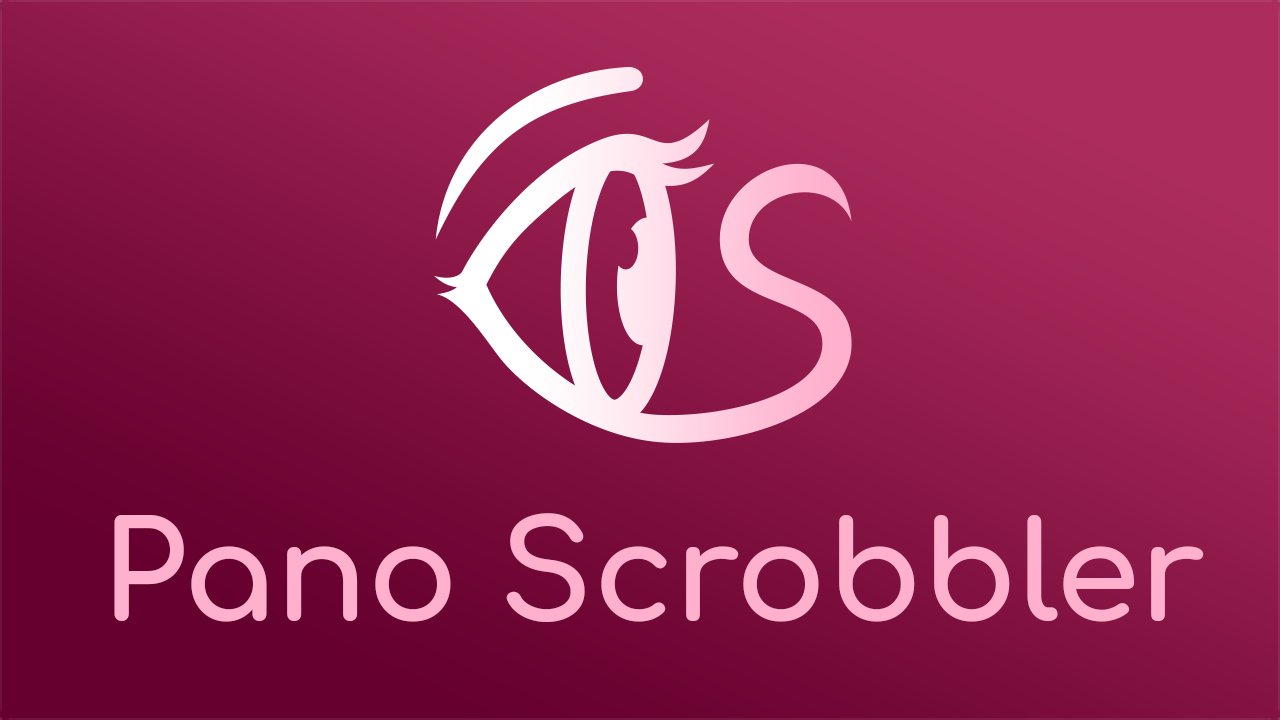
<style>
.page{position:relative;width:1280px;height:720px}
.page>*{position:absolute;margin:0}
.t1{font:136px "Comfortaa-Bold";color:#ffb0cd}
</style>
<div class="page">
<p class="t1" style="left:114px;top:513px;width:1090px;height:109px">Pano Scrobbler</p>
</div>
